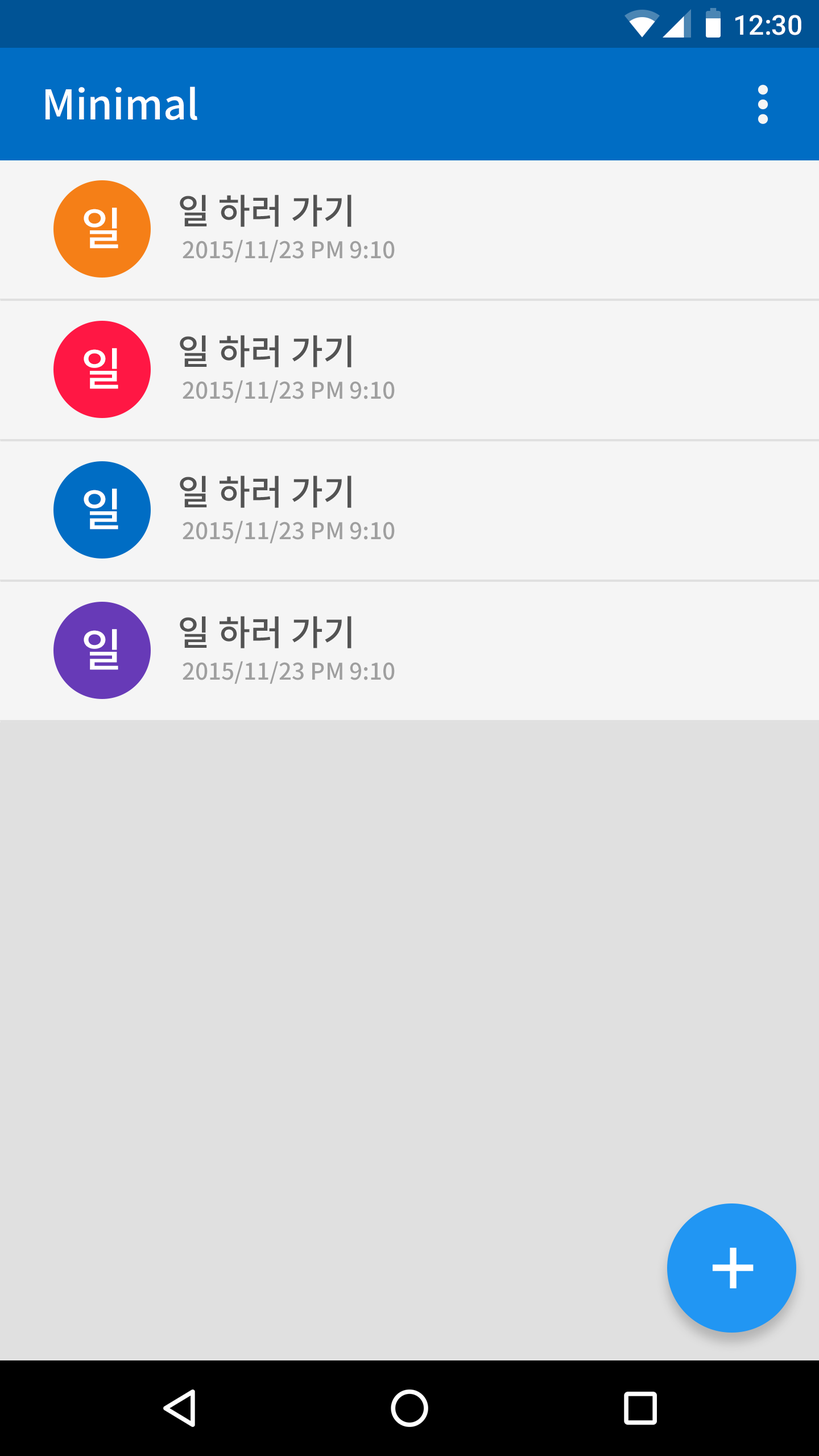
<style>
.page{position:relative;width:819px;height:1456px;background:#e0e0e0}
.page>*{position:absolute;margin:0}
.t1{font:27.3px "Roboto-Medium";color:#ffffff}
.t2{font:40.9px "NotoSansCJKkr-Medium";color:#ffffff}
.t3{font:35.3px "NotoSansCJKkr-Medium";color:#535353}
.t4{font:45.3px "NotoSansCJKkr-Medium";color:#ffffff}
.t5{font:23px "NotoSansCJKkr-Medium";color:#9f9f9f}
</style>
<div class="page">
<p class="t1" style="left:735px;top:15px;width:66px;height:20px">12:30</p>
<p class="t2" style="left:45px;top:86px;width:152px;height:34px">Minimal</p>
<p class="t3" style="left:180px;top:195px;width:171px;height:32px">일 하러 가기</p>
<p class="t4" style="left:84px;top:208px;width:34px;height:41px">일</p>
<p class="t5" style="left:183px;top:239px;width:212px;height:24px">2015/11/23 PM 9:10</p>
<p class="t3" style="left:180px;top:335px;width:171px;height:32px">일 하러 가기</p>
<p class="t4" style="left:84px;top:348px;width:34px;height:41px">일</p>
<p class="t5" style="left:183px;top:380px;width:212px;height:23px">2015/11/23 PM 9:10</p>
<p class="t3" style="left:180px;top:475px;width:171px;height:33px">일 하러 가기</p>
<p class="t4" style="left:84px;top:489px;width:34px;height:40px">일</p>
<p class="t5" style="left:183px;top:520px;width:212px;height:24px">2015/11/23 PM 9:10</p>
<p class="t3" style="left:180px;top:616px;width:171px;height:32px">일 하러 가기</p>
<p class="t4" style="left:84px;top:629px;width:34px;height:41px">일</p>
<p class="t5" style="left:183px;top:661px;width:212px;height:23px">2015/11/23 PM 9:10</p>
</div>
